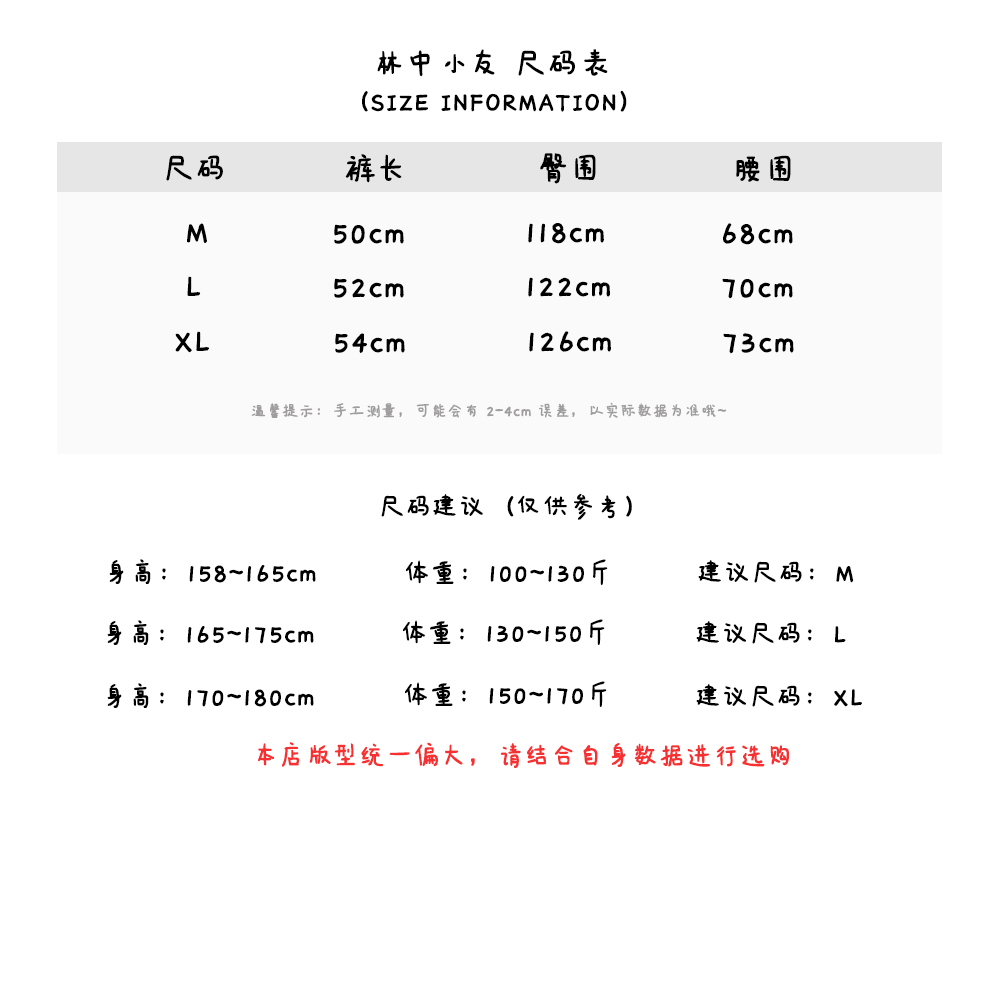
<style>
.page{position:relative;width:1000px;height:1000px;background:#ffffff}
.page>*{position:absolute;margin:0}
.t1{font:36px "IdeaFonts-QianXiaTi";color:#000000;font-weight:bold}
.t2{font:30px "IdeaFonts-QianXiaTi";color:#000000;font-weight:bold}
.t3{font:18px "IdeaFonts-QianXiaTi";color:#9f9d9d;font-weight:bold}
.t4{font:30px "IdeaFonts-QianXiaTi";color:#f73131;font-weight:bold}
</style>
<div class="page">
<p class="t1" style="left:377px;top:49px;width:231px;height:28px">林中小友 尺码表</p>
<p class="t2" style="left:362px;top:90px;width:265px;height:22px">（SIZE INFORMATION）</p>
<p class="t1" style="left:166px;top:155px;width:57px;height:26px">尺码</p>
<p class="t1" style="left:345px;top:154px;width:57px;height:29px">裤长</p>
<p class="t1" style="left:540px;top:153px;width:56px;height:31px">臀围</p>
<p class="t1" style="left:736px;top:155px;width:55px;height:27px">腰围</p>
<p class="t1" style="left:187px;top:223px;width:20px;height:20px">M</p>
<p class="t1" style="left:334px;top:224px;width:70px;height:20px">50cm</p>
<p class="t1" style="left:528px;top:223px;width:76px;height:21px">118cm</p>
<p class="t1" style="left:723px;top:223px;width:70px;height:22px">68cm</p>
<p class="t1" style="left:187px;top:276px;width:14px;height:20px">L</p>
<p class="t1" style="left:334px;top:278px;width:70px;height:20px">52cm</p>
<p class="t1" style="left:528px;top:277px;width:82px;height:20px">122cm</p>
<p class="t1" style="left:722px;top:278px;width:71px;height:21px">70cm</p>
<p class="t1" style="left:175px;top:331px;width:34px;height:22px">XL</p>
<p class="t1" style="left:335px;top:333px;width:70px;height:20px">54cm</p>
<p class="t1" style="left:529px;top:331px;width:82px;height:21px">126cm</p>
<p class="t1" style="left:723px;top:333px;width:71px;height:21px">73cm</p>
<p class="t3" style="left:251px;top:402px;width:476px;height:16px">温馨提示：手工测量，可能会有 2-4cm 误差，以实际数据为准哦~</p>
<p class="t2" style="left:381px;top:493px;width:251px;height:27px">尺码建议（仅供参考）</p>
<p class="t2" style="left:109px;top:559px;width:207px;height:25px">身高：158~165cm</p>
<p class="t2" style="left:406px;top:559px;width:202px;height:26px">体重：100~130斤</p>
<p class="t2" style="left:698px;top:560px;width:156px;height:23px">建议尺码：M</p>
<p class="t2" style="left:107px;top:620px;width:207px;height:25px">身高：165~175cm</p>
<p class="t2" style="left:403px;top:619px;width:202px;height:26px">体重：130~150斤</p>
<p class="t2" style="left:696px;top:621px;width:150px;height:23px">建议尺码：L</p>
<p class="t2" style="left:107px;top:683px;width:207px;height:25px">身高：170~180cm</p>
<p class="t2" style="left:405px;top:681px;width:202px;height:26px">体重：150~170斤</p>
<p class="t2" style="left:696px;top:684px;width:166px;height:23px">建议尺码：XL</p>
<p class="t4" style="left:258px;top:742px;width:531px;height:26px">本店版型统一偏大，请结合自身数据进行选购</p>
</div>
